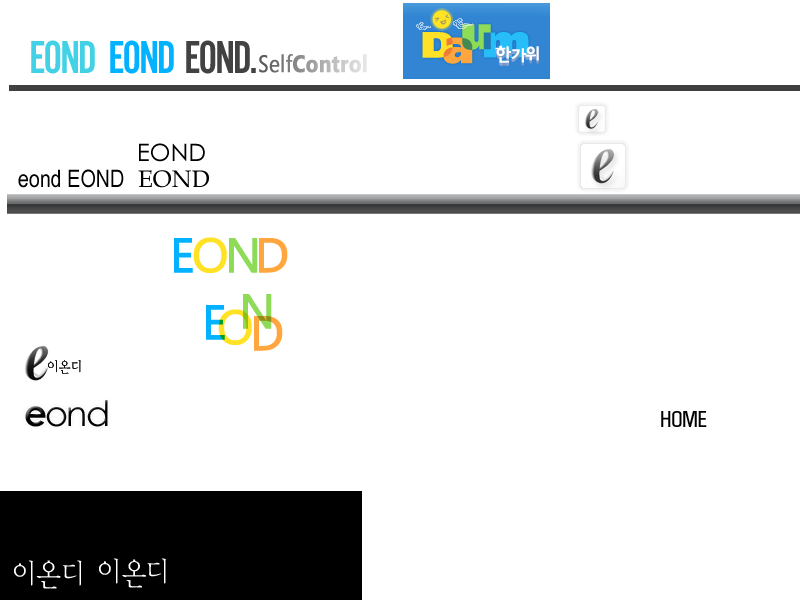
<style>
.page{position:relative;width:800px;height:600px;background:#ffffff}
.page>*{position:absolute;margin:0}
.t1{font:48px "AlternateGothicEFOP-NoTwo";letter-spacing:-0.05em;color:#43d1e6}
.t2{font:48px "AlternateGothicEFOP-NoTwo";letter-spacing:-0.05em;color:#00b2ff}
.t3{font:48px "AlternateGothicEFOP-NoTwo";letter-spacing:-0.05em;color:#424242}
.t4{font:24px "SegoeUI-Bold";font-weight:bold;scale:0.85 1}
.t5{font:24px "SegoeUI-Regular";font-weight:bold;scale:0.85 1}
.t6{font:24px "CenturyGothic";color:#000000}
.t7{font:24px "ArialNarrow";color:#000000}
.t8{font:24px "BookAntiqua";color:#000000}
.t9{font:48px "SegoeUI-Regular";letter-spacing:-0.05em;color:#00b2ff;font-weight:bold}
.t10{font:48px "SegoeUI-Regular";letter-spacing:-0.05em;color:#ffe226;font-weight:bold}
.t11{font:48px "SegoeUI-Regular";letter-spacing:-0.05em;color:#8edb58;font-weight:bold}
.t12{font:48px "SegoeUI-Regular";letter-spacing:-0.05em;color:#ffa63f;font-weight:bold}
.t13{font:14.3px "YDIYMjO220";color:#000000;scale:0.91 1}
.t14{font:35px "CenturyGothic";letter-spacing:-0.05em;color:#000000}
.t15{font:36px "CenturyGothic-Bold";letter-spacing:-0.05em;color:#000000}
.t16{font:24px "UniversalCondensed-Regular";color:#000000}
.t17{font:30px "YDIYMjO220";color:#ffffff;scale:0.9 1}
</style>
<div class="page">
<p class="t1" style="left:31px;top:40px;width:64px;height:34px">EOND</p>
<p class="t2" style="left:110px;top:40px;width:64px;height:34px">EOND</p>
<p class="t3" style="left:186px;top:40px;width:70px;height:34px">EOND.</p>
<p class="t4" style="left:259px;top:54px;width:108px;height:19px"><span class="t5">Self</span>Control</p>
<p class="t6" style="left:139px;top:143px;width:66px;height:19px">EOND</p>
<p class="t7" style="left:18px;top:169px;width:106px;height:19px">eond EOND</p>
<p class="t8" style="left:138px;top:170px;width:71px;height:18px">EOND</p>
<p class="t9" style="left:174px;top:238px;width:19px;height:35px">E</p>
<p class="t10" style="left:193px;top:237px;width:34px;height:36px">O</p>
<p class="t11" style="left:229px;top:238px;width:29px;height:35px">N</p>
<p class="t12" style="left:259px;top:238px;width:29px;height:35px">D</p>
<p class="t11" style="left:243px;top:294px;width:29px;height:35px">N</p>
<p class="t9" style="left:206px;top:305px;width:19px;height:35px">E</p>
<p class="t10" style="left:218px;top:309px;width:34px;height:36px">O</p>
<p class="t12" style="left:254px;top:316px;width:29px;height:35px">D</p>
<p class="t13" style="left:48px;top:360px;width:33px;height:14px">이온디</p>
<p class="t13" style="left:48px;top:360px;width:33px;height:14px">이온디</p>
<p class="t14" style="left:25px;top:400px;width:83px;height:27px"><span class="t15">e</span>ond</p>
<p class="t16" style="left:661px;top:411px;width:46px;height:16px">HOME</p>
<p class="t17" style="left:99px;top:558px;width:19px;height:26px">이</p>
<p class="t17" style="left:147px;top:558px;width:19px;height:26px">디</p>
<p class="t17" style="left:14px;top:560px;width:68px;height:29px">이온디</p>
<p class="t17" style="left:122px;top:559px;width:24px;height:29px">온</p>
</div>
